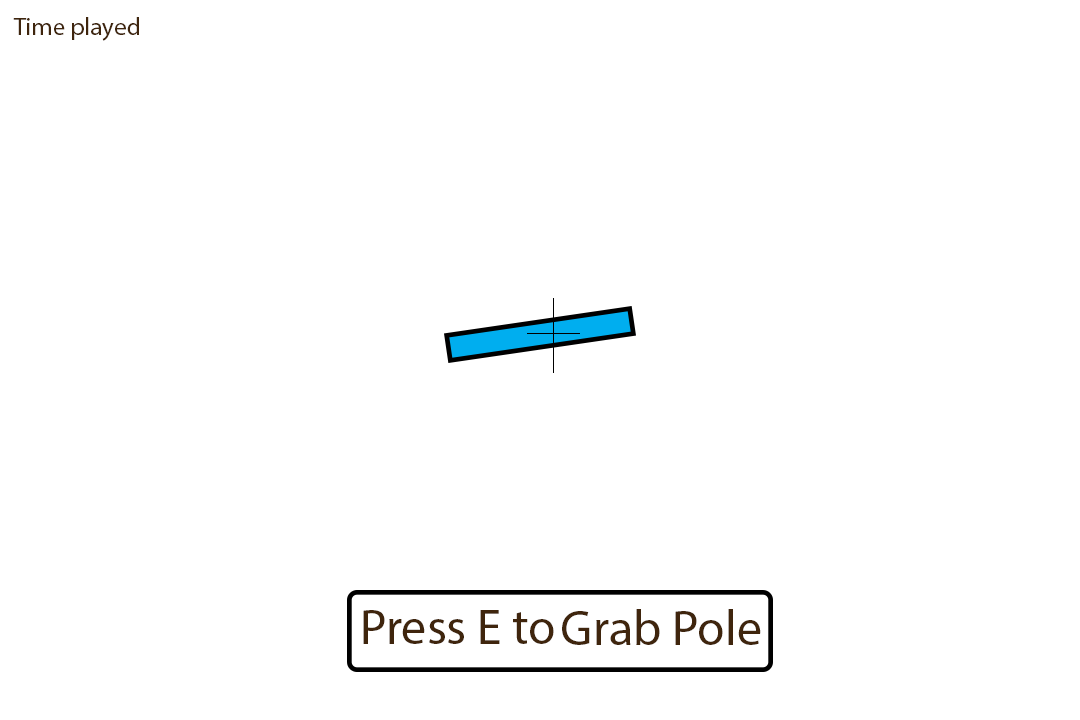
<style>
.page{position:relative;width:1080px;height:720px;background:#ffffff}
.page>*{position:absolute;margin:0}
.t1{font:25px "MyriadPro-Regular";color:#3f250d}
.t2{font:12px "MyriadPro-Regular";color:#3f250d}
.t3{font:50px "MyriadPro-Regular";color:#3f250d}
</style>
<div class="page">
<p class="t1" style="left:13px;top:17px;width:126px;height:24px">Time played</p>
<p class="t2" style="left:363px;top:610px;width:191px;height:34px;text-align:center">Press E to</p>
<p class="t3" style="left:562px;top:609px;width:199px;height:36px">Grab Pole</p>
</div>
